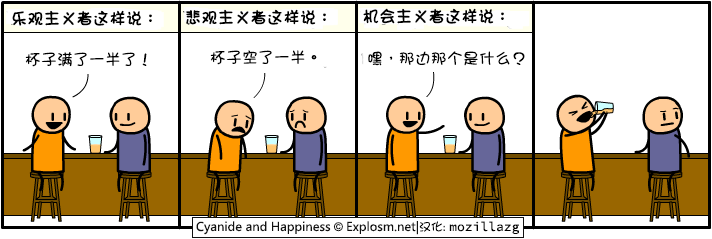
<style>
.page{position:relative;width:712px;height:239px;background:#ffffff}
.page>*{position:absolute;margin:0}
.t1{font:16px "DFGirl";color:#000000;font-weight:bold}
.t2{font:16px "DFGirl";color:#000000}
</style>
<div class="page">
<p class="t1" style="left:12px;top:10px;width:140px;height:16px">乐观主义者这样说：</p>
<p class="t1" style="left:186px;top:9px;width:140px;height:16px">悲观主义者这样说：</p>
<p class="t1" style="left:363px;top:8px;width:141px;height:16px">机会主义者这样说：</p>
<p class="t2" style="left:25px;top:52px;width:122px;height:15px">杯子满了一半了！</p>
<p class="t2" style="left:210px;top:50px;width:107px;height:15px">杯子空了一半。</p>
<p class="t2" style="left:368px;top:51px;width:157px;height:15px">嘿，那边那个是什么？</p>
</div>
